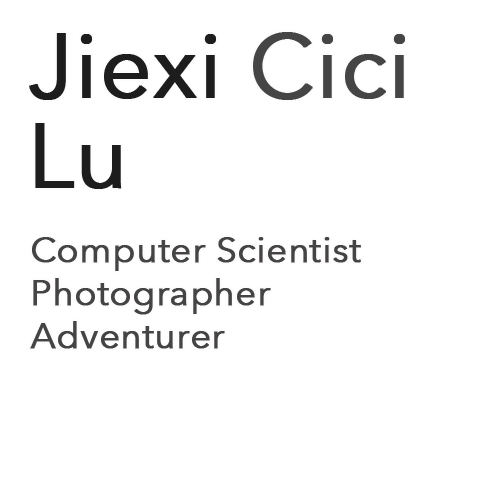
<style>
.page{position:relative;width:500px;height:500px;background:#ffffff}
.page>*{position:absolute;margin:0}
.t1{font:90px "AvenirNext-Regular";color:#1d1d1d;font-weight:bold}
.t2{font:90px "AvenirNext-Regular";color:#454545;font-weight:bold}
.t3{font:36px "AvenirNext-Regular";color:#444444;font-weight:bold}
</style>
<div class="page">
<p class="t1" style="left:29px;top:32px;width:376px;height:68px">Jiexi <span class="t2">Cici</span></p>
<p class="t1" style="left:35px;top:123px;width:87px;height:66px">Lu</p>
<p class="t3" style="left:30px;top:237px;width:331px;height:112px">Computer Scientist<br>Photographer<br>Adventurer</p>
</div>
